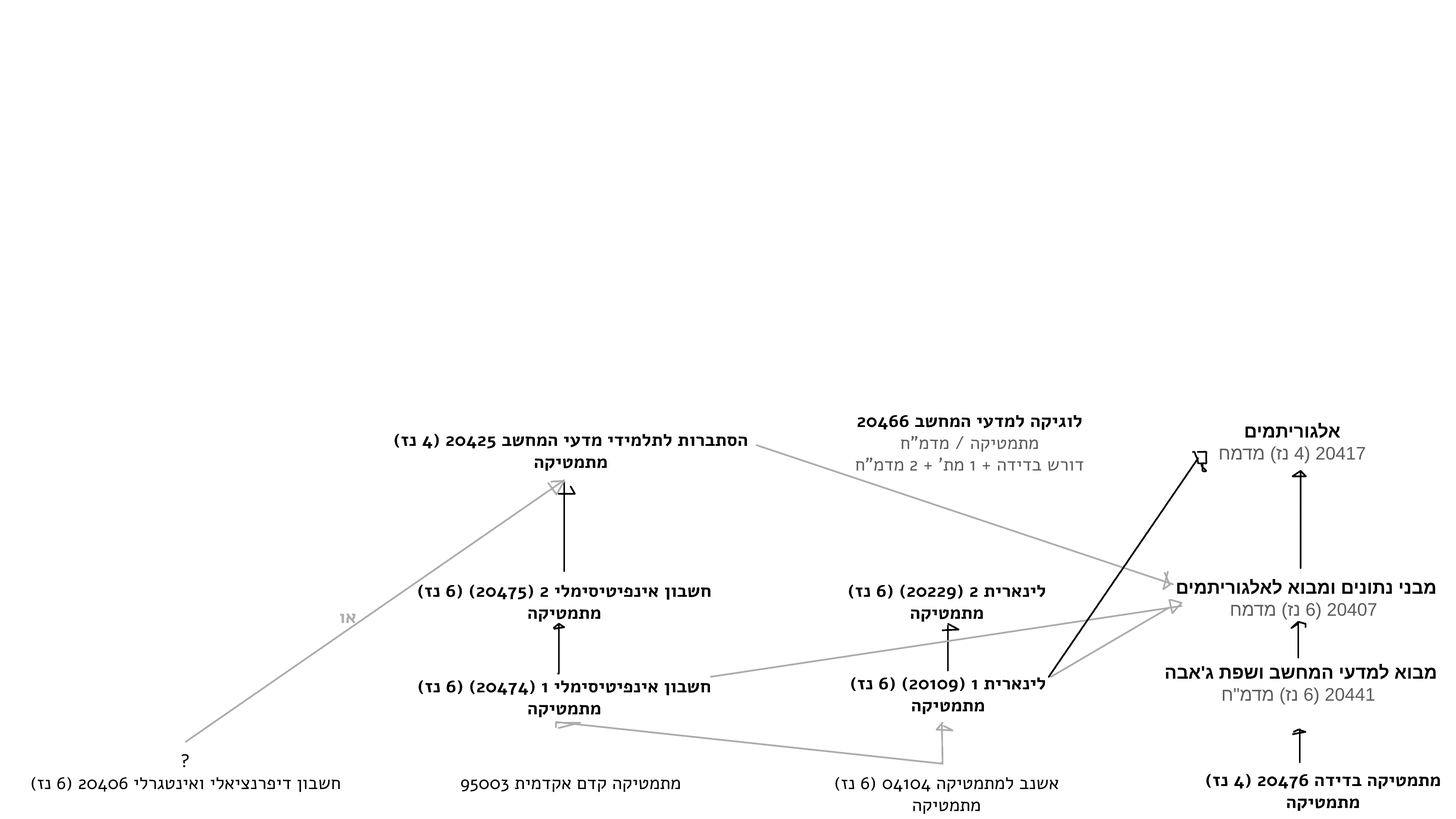
<style>
.page{position:relative;width:1456px;height:819px;background:#ffffff}
.page>*{position:absolute;margin:0}
.t1{font:18.2px "Alef-Regular";color:#5c5c5c}
.t2{font:18.2px "Alef-Bold";color:#000000}
.t3{font:18.2px "Arimo-Regular";color:#5c5c5c}
.t4{font:18.2px "Arimo-Bold";color:#000000}
.t5{font:18.2px "Alef-Bold";color:#acacac}
.t6{font:18.2px "Alef-Regular";color:#000000}
</style>
<div class="page">
<p class="t1" style="left:856px;top:415px;width:227px;height:56px;text-align:center"><span class="t2">לוגיקה למדעי המחשב 20466<br></span>מתמטיקה / מדמ"ח<br>דורש בדידה + 1 מת' + 2 מדמ"ח</p>
<p class="t3" style="left:1220px;top:422px;width:145px;height:41px;text-align:center"><span class="t4">אלגוריתמים<br></span>20417 )4 נז( מדמח</p>
<p class="t2" style="left:394px;top:433px;width:353px;height:38px;text-align:center">הסתברות לתלמידי מדעי המחשב 20425 )4 נז(<br>מתמטיקה</p>
<p class="t4" style="left:1177px;top:579px;width:258px;height:41px;text-align:center">מבני נתונים ומבוא לאלגוריתמים <br><span class="t3">20407 )6 נז( מדמח</span></p>
<p class="t2" style="left:418px;top:584px;width:293px;height:38px;text-align:center">חשבון אינפיטיסימלי 2 )20475( )6 נז(<br>מתמטיקה</p>
<p class="t2" style="left:849px;top:584px;width:196px;height:38px;text-align:center">לינארית 2 )20229( )6 נז(<br>מתמטיקה</p>
<p class="t5" style="left:340px;top:613px;width:16px;height:11px">או</p>
<p class="t4" style="left:1166px;top:664px;width:270px;height:40px;text-align:center">מבוא למדעי המחשב ושפת ג'אבה <br><span class="t3">20441 )6 נז( מדמ"ח</span></p>
<p class="t2" style="left:851px;top:677px;width:194px;height:37px;text-align:center">לינארית 1 )20109( )6 נז(<br>מתמטיקה</p>
<p class="t2" style="left:419px;top:680px;width:291px;height:37px;text-align:center">חשבון אינפיטיסימלי 1 )20474( )6 נז(<br>מתמטיקה</p>
<p class="t6" style="left:31px;top:754px;width:309px;height:38px;text-align:center">?<br>חשבון דיפרנציאלי ואינטגרלי 20406 )6 נז(</p>
<p class="t2" style="left:1206px;top:773px;width:234px;height:38px;text-align:center">מתמטיקה בדידה 20476 )4 נז(<br>מתמטיקה</p>
<p class="t6" style="left:461px;top:779px;width:219px;height:13px">מתמטיקה קדם אקדמית 95003</p>
<p class="t6" style="left:835px;top:777px;width:223px;height:37px;text-align:center">אשנב למתמטיקה 04104 )6 נז(<br>מתמטיקה</p>
</div>
